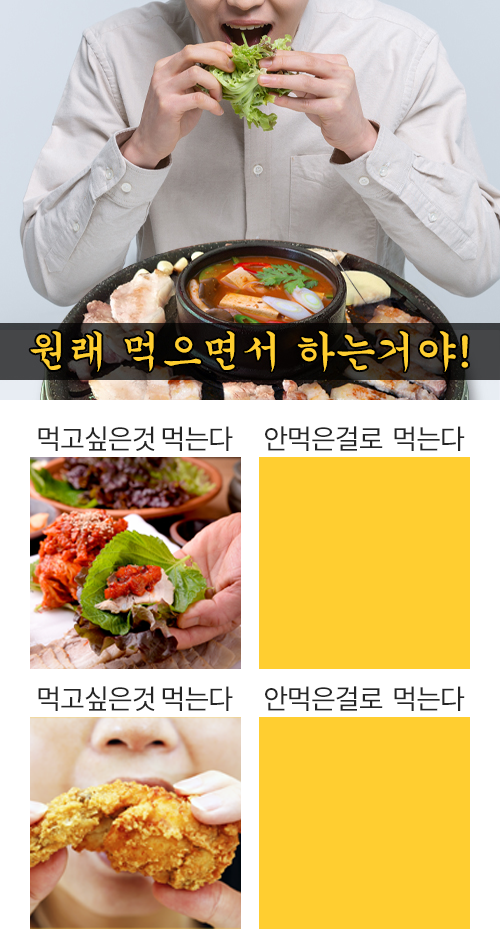
<style>
.page{position:relative;width:500px;height:950px}
.page>*{position:absolute;margin:0}
.t1{font:27.5px "SpoqaHanSansNeo-Regular";letter-spacing:-0.05em;color:#252525}
</style>
<div class="page">
<p class="t1" style="left:38px;top:426px;width:195px;height:25px">먹고싶은것 먹는다</p>
<p class="t1" style="left:265px;top:426px;width:200px;height:25px">안먹은걸로  먹는다</p>
<p class="t1" style="left:38px;top:686px;width:195px;height:25px">먹고싶은것 먹는다</p>
<p class="t1" style="left:265px;top:686px;width:200px;height:25px">안먹은걸로  먹는다</p>
</div>
